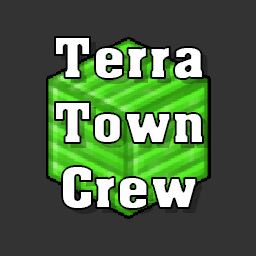
<style>
.page{position:relative;width:256px;height:256px;background:#333333}
.page>*{position:absolute;margin:0}
.t1{font:54.2px "AcmeFont";letter-spacing:0.01em;color:#ffffff}
</style>
<div class="page">
<p class="t1" style="left:55px;top:37px;width:148px;height:172px;text-align:center">Terra Town<br>Crew</p>
</div>
